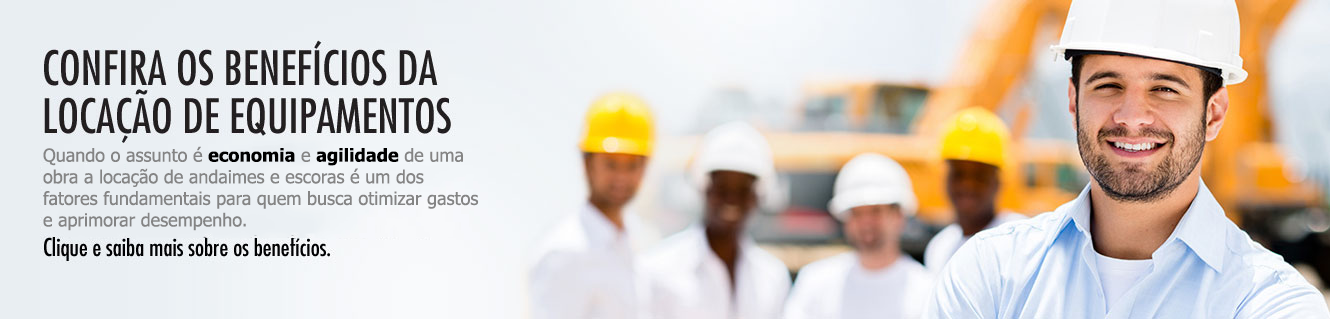
<style>
.page{position:relative;width:1330px;height:319px}
.page>*{position:absolute;margin:0}
.t1{font:18px "Tahoma";color:#848484}
.t2{font:18px "Tahoma-Bold";color:#000000}
</style>
<div class="page">
<p class="t1" style="left:43px;top:146px;width:436px;height:85px">Quando o assunto é <span class="t2">economia</span> e <span class="t2">agilidade</span> de uma obra a locação de andaimes e escoras é um dos fatores fundamentais para quem busca otimizar gastos e aprimorar desempenho.</p>
</div>
